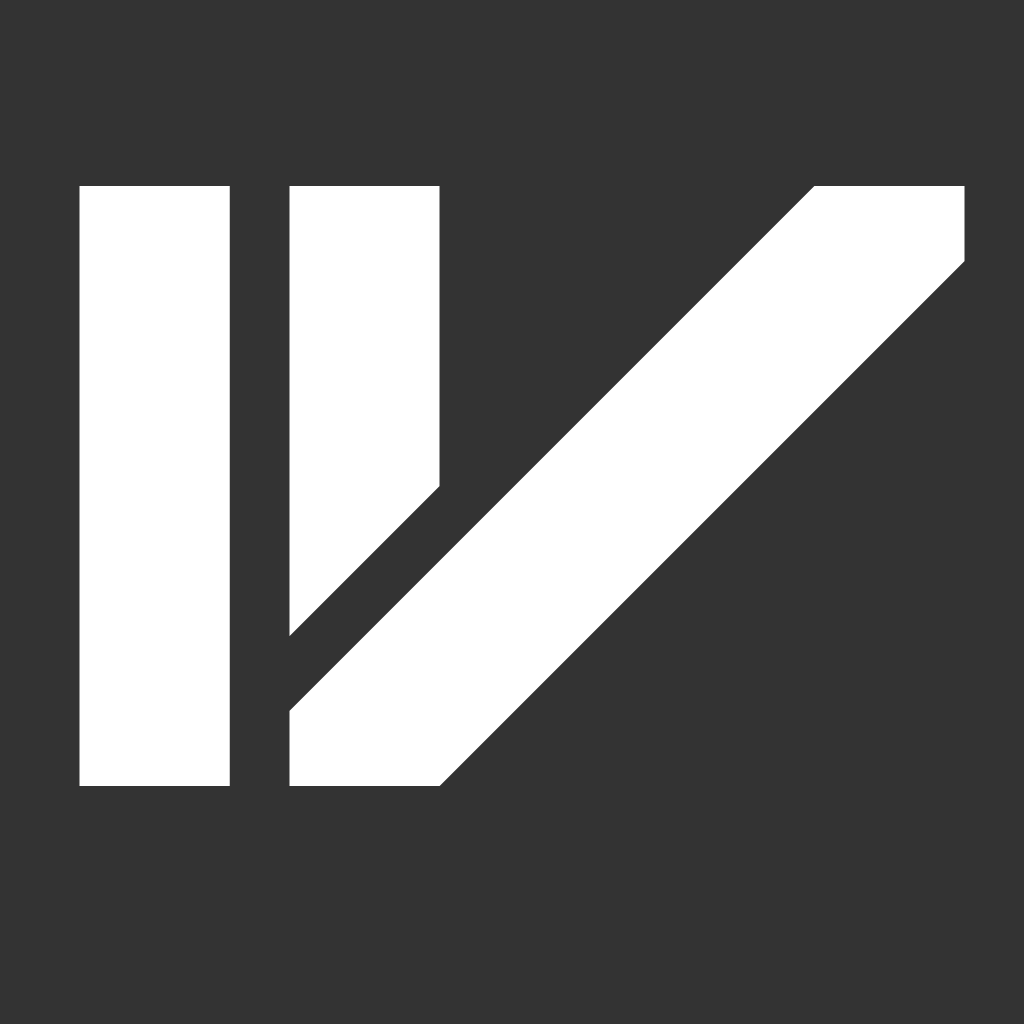
<style>
.page{position:relative;width:1024px;height:1024px;background:#333333}
.page>*{position:absolute;margin:0}
.t1{font:600px "Mechsuit";color:#ffffff}
</style>
<div class="page">
<p class="t1" style="left:79px;top:186px;width:886px;height:600px">IV</p>
</div>
